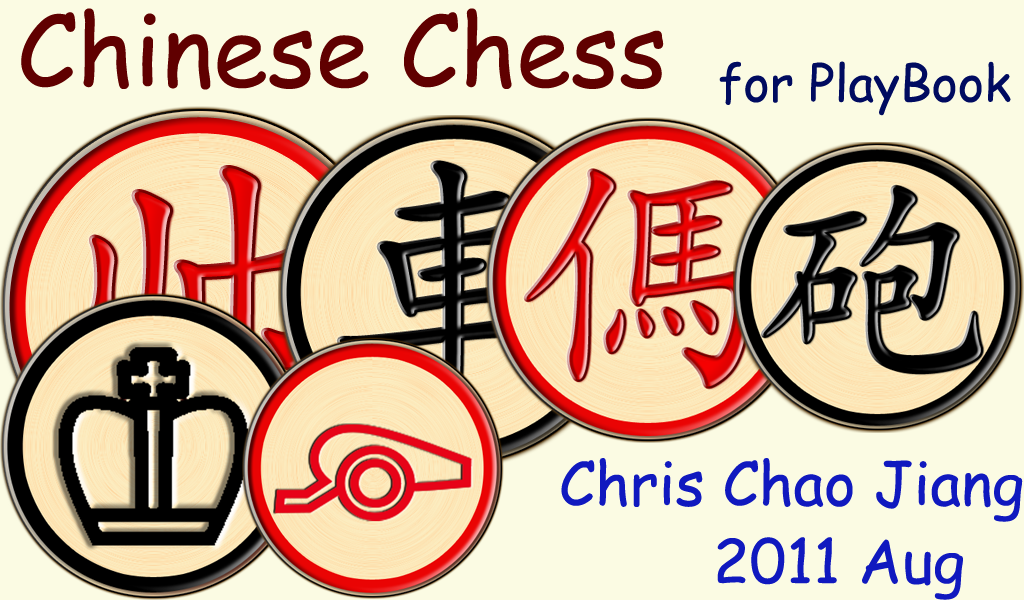
<style>
.page{position:relative;width:1024px;height:600px;background:#fbfbe3}
.page>*{position:absolute;margin:0}
.t1{font:99px "ComicSansMS";color:#600000}
.t2{font:50px "ComicSansMS";color:#000b60}
.t3{font:60px "ComicSansMS";color:#1019bf}
</style>
<div class="page">
<p class="t1" style="left:21px;top:8px;width:643px;height:82px">Chinese Chess</p>
<p class="t2" style="left:719px;top:61px;width:292px;height:55px">for PlayBook</p>
<p class="t3" style="left:561px;top:458px;width:462px;height:64px">Chris Chao Jiang</p>
<p class="t3" style="left:717px;top:537px;width:246px;height:63px">2011 Aug</p>
</div>
